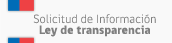
<style>
.page{position:relative;width:172px;height:43px;background:#f9f9f9}
.page>*{position:absolute;margin:0}
.t1{font:12px/11px "gobCL-Light";letter-spacing:0.02em;color:#7f7f7f}
.t2{font:12px/11px "gobCL-Bold";letter-spacing:0.02em;color:#7f7f7f}
</style>
<div class="page">
<p class="t1" style="left:33px;top:14px;width:123px;height:23px;text-align:center">Solicitud de Información<br><span class="t2">Ley de transparencia</span></p>
</div>
